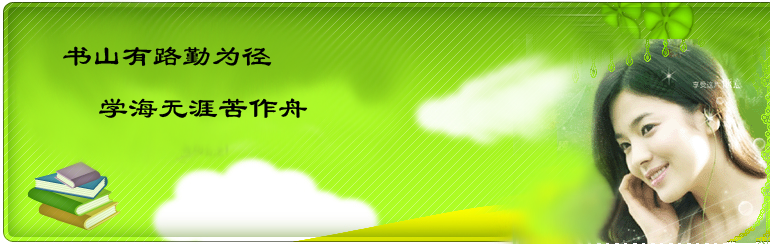
<style>
.page{position:relative;width:770px;height:244px}
.page>*{position:absolute;margin:0}
.t1{font:30px "LiSu";color:#000000}
.t2{font:18px "SimSun";color:#000000}
</style>
<div class="page">
<p class="t1" style="left:63px;top:46px;width:245px;height:72px"><span class="t2"><br> </span>书山有路勤为径<br>  学海无涯苦作舟</p>
</div>
